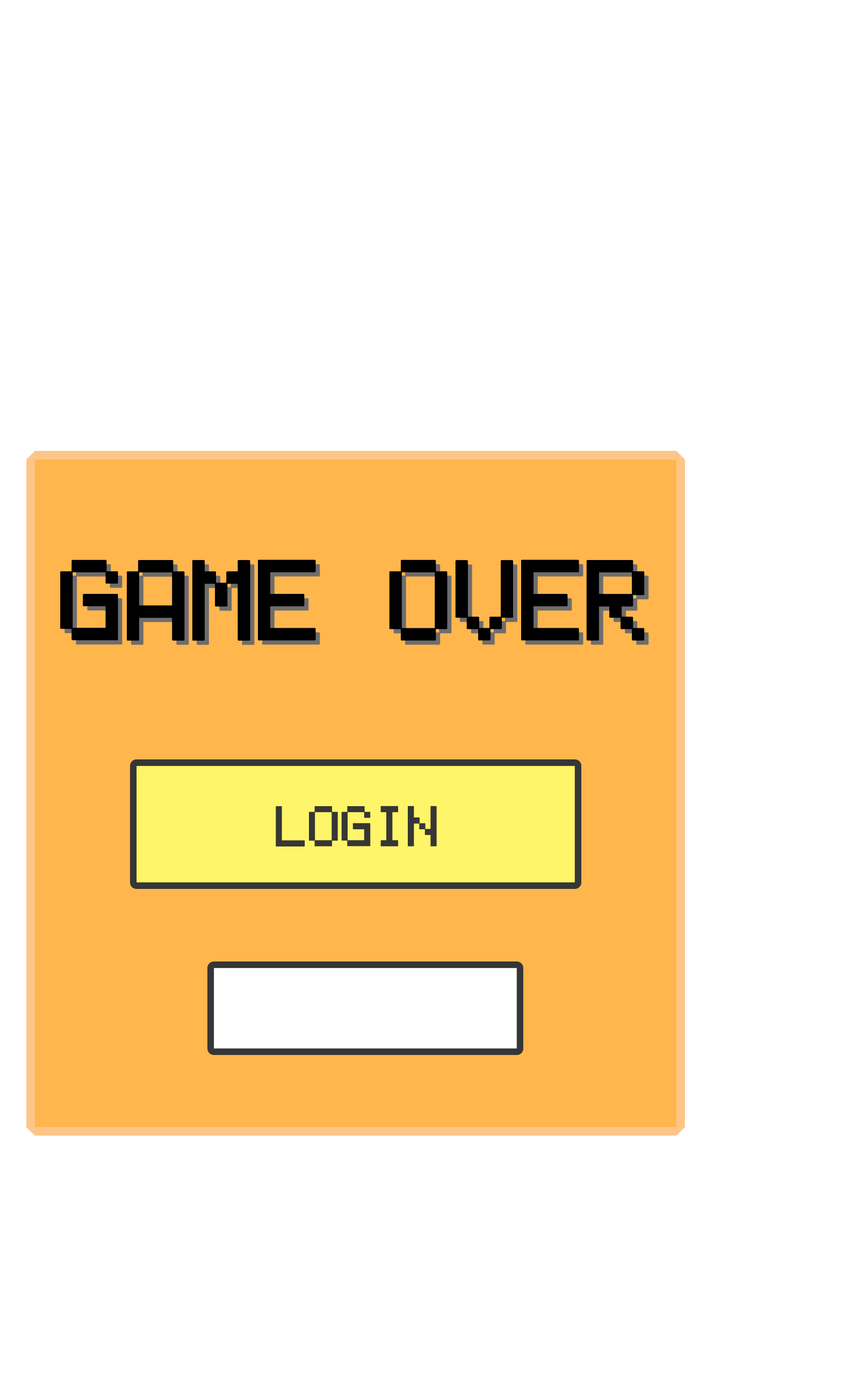
<style>
.page{position:relative;width:865px;height:1378px;background:#ffffff}
.page>*{position:absolute;margin:0}
.t1{font:107.5px "LCDSolid";color:#000000}
.t2{font:107.5px "LCDSolid"}
.t3{font:53.7px "LCDSolid";color:#363636}
</style>
<div class="page">
<p class="t1" style="left:60px;top:559px;width:585px;height:82px">GAME OVER</p>
<p class="t1" style="left:60px;top:559px;width:585px;height:82px">GAME OVER</p>
<p class="t2" style="left:64px;top:564px;width:585px;height:81px">GAME OVER</p>
<p class="t3" style="left:276px;top:806px;width:161px;height:40px">LOGIN</p>
</div>
